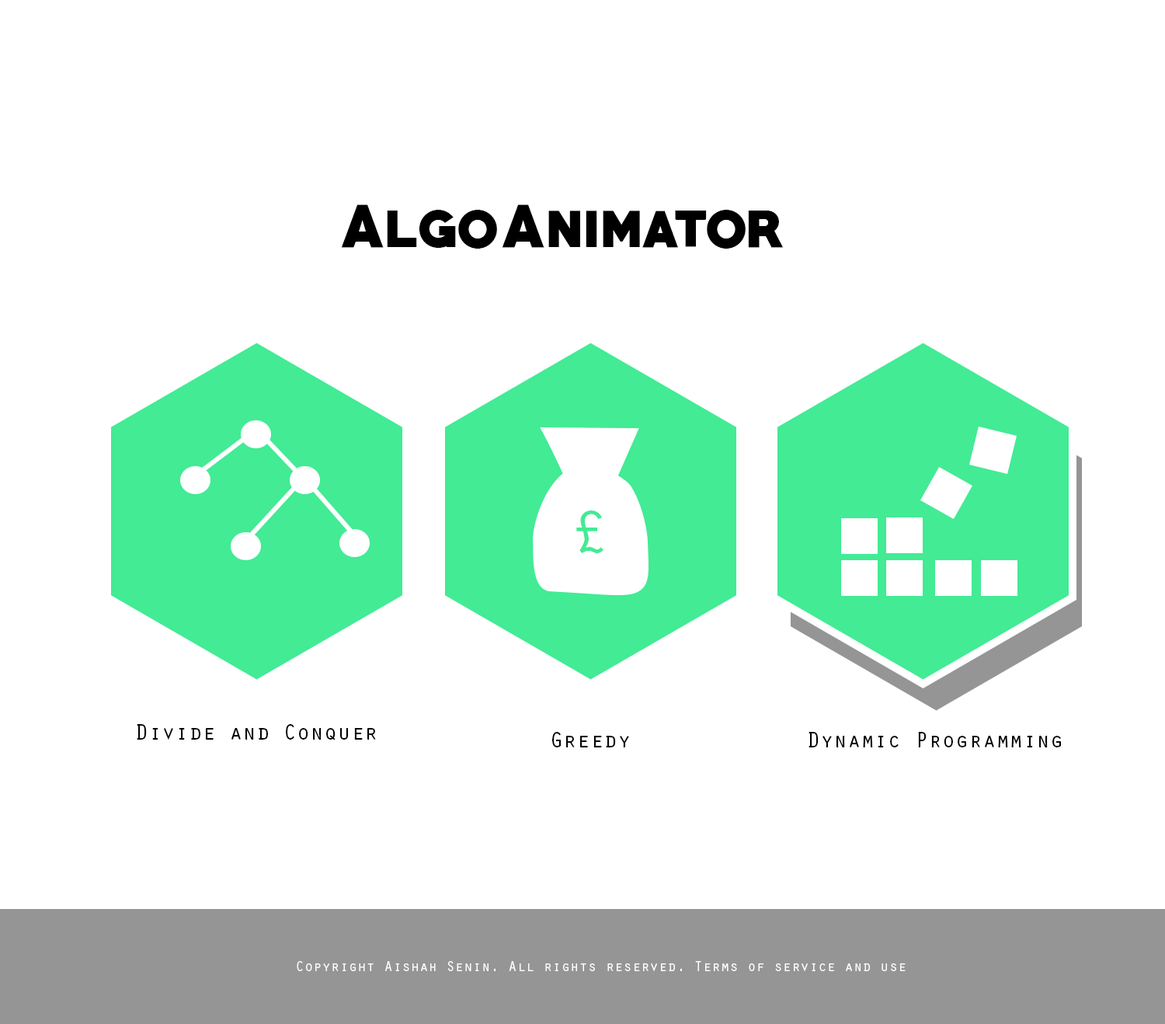
<style>
.page{position:relative;width:1165px;height:1024px;background:#ffffff}
.page>*{position:absolute;margin:0}
.t1{font:55.1px "PRIMETIME-Regular";color:#000000}
.t2{font:61.4px "OratorStd";color:#42eb94}
.t3{font:22.5px "OratorStd";color:#000000}
.t4{font:14.8px "OratorStd";color:#fefefe}
</style>
<div class="page">
<p class="t1" style="left:341px;top:204px;width:443px;height:45px">AlgoAnimator</p>
<p class="t2" style="left:576px;top:510px;width:27px;height:43px">£</p>
<p class="t3" style="left:137px;top:724px;width:239px;height:16px">Divide and Conquer</p>
<p class="t3" style="left:552px;top:732px;width:77px;height:15px">Greedy</p>
<p class="t3" style="left:808px;top:732px;width:253px;height:15px">Dynamic Programming</p>
<p class="t4" style="left:297px;top:961px;width:609px;height:10px">Copyright Aishah Senin. All rights reserved. Terms of service and use</p>
</div>
